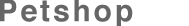
<style>
.page{position:relative;width:189px;height:26px;background:#ffffff}
.page>*{position:absolute;margin:0}
.t1{font:30px "Helvetica-Bold";letter-spacing:0.095em;color:#666666}
</style>
<div class="page">
<p class="t1" style="left:0px;top:0px;width:133px;height:28px">Petshop</p>
</div>
